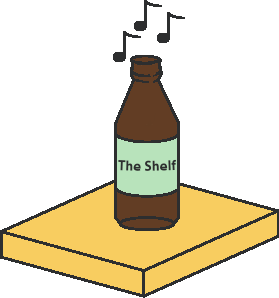
<style>
.page{position:relative;width:279px;height:298px;background:#ffffff}
.page>*{position:absolute;margin:0}
.t1{font:14px "MyriadPro-Bold";color:#2d2e2f}
</style>
<div class="page">
<p class="t1" style="left:118px;top:159px;width:58px;height:12px">The Shelf</p>
</div>
